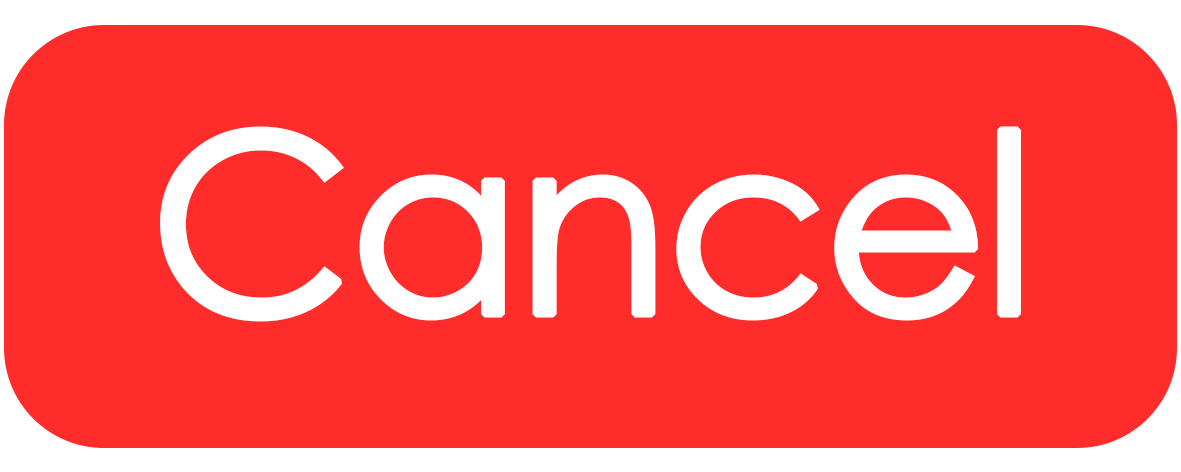
<style>
.page{position:relative;width:1181px;height:472px;background:#ff2c2c}
.page>*{position:absolute;margin:0}
.t1{font:250px "CenturyGothic";letter-spacing:-0.04em;color:#ffffff;font-weight:bold}
</style>
<div class="page">
<p class="t1" style="left:160px;top:126px;width:861px;height:196px">Cancel</p>
</div>
